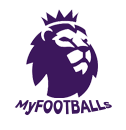
<style>
.page{position:relative;width:126px;height:130px;background:#ffffff}
.page>*{position:absolute;margin:0}
.t1{font:11.4px "Montserrat-ExtraBold";color:#3c175c}
</style>
<div class="page">
<p class="t1" style="left:14px;top:100px;width:98px;height:16px">MyFOOTBALLs</p>
</div>
